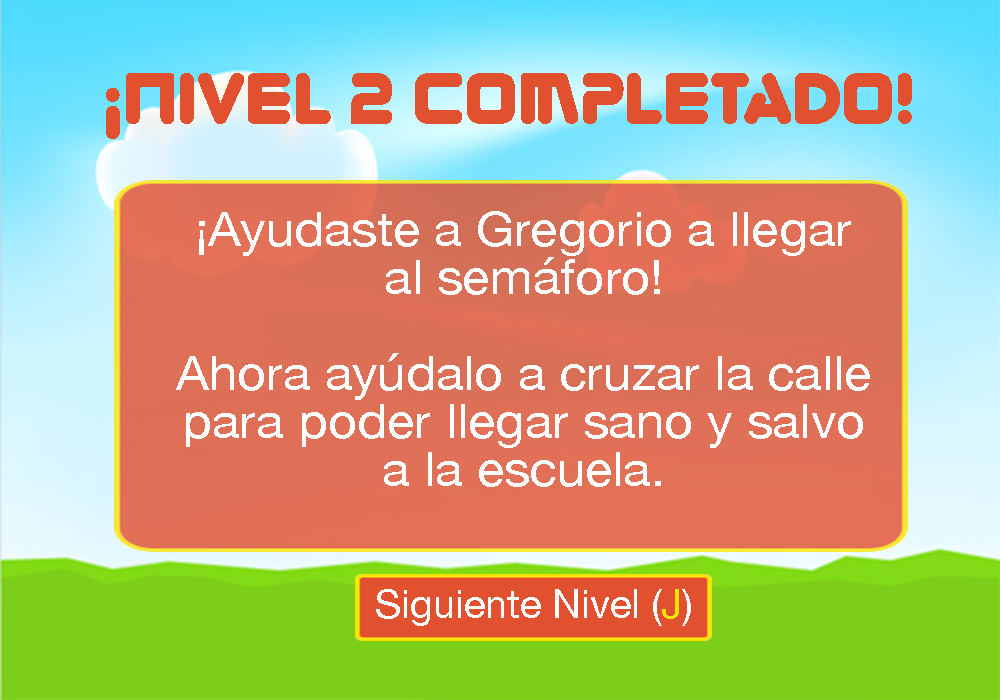
<style>
.page{position:relative;width:1000px;height:700px}
.page>*{position:absolute;margin:0}
.t1{font:72px "Zorque-Regular";color:#e15130}
.t2{font:48px/48px "HelveticaNeue";color:#ffffff;scale:1.06 1}
.t3{font:40px "HelveticaNeue";color:#ffffff}
.t4{font:40px "HelveticaNeue";color:#ffe100}
</style>
<div class="page">
<p class="t1" style="left:106px;top:73px;width:806px;height:66px">¡NiVEL 2 COMPLETADO!</p>
<p class="t2" style="left:176px;top:211px;width:694px;height:276px;text-align:center">¡Ayudaste a Gregorio a llegar<br>al semáforo!<br><br>Ahora ayúdalo a cruzar la calle<br>para poder llegar sano y salvo<br>a la escuela.</p>
<p class="t3" style="left:376px;top:589px;width:315px;height:37px">Siguiente Nivel (<span class="t4">J</span>)</p>
</div>
